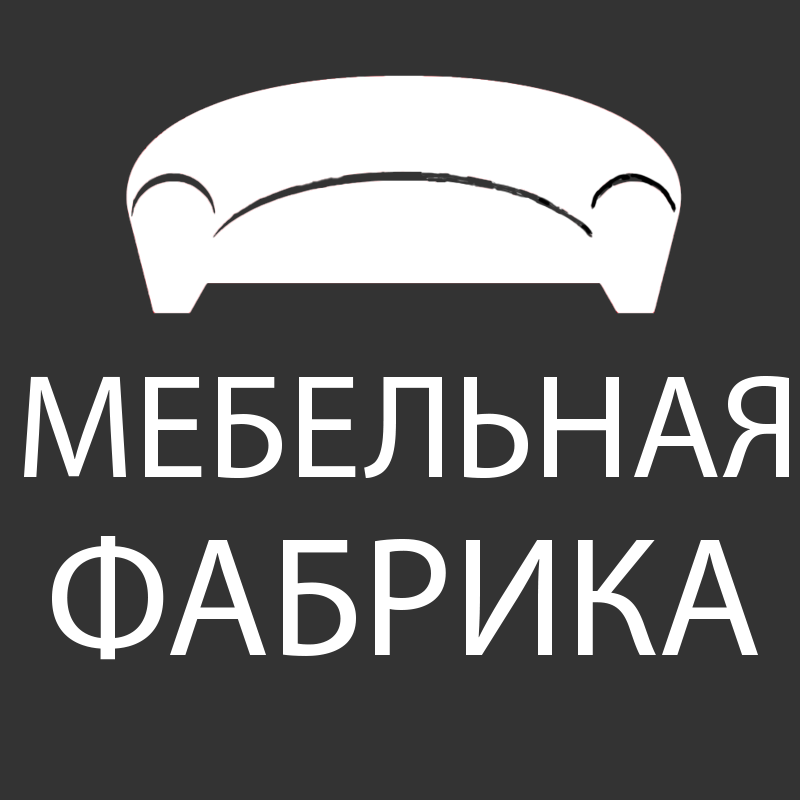
<style>
.page{position:relative;width:800px;height:800px;background:#333333}
.page>*{position:absolute;margin:0}
.t1{font:148.3px "MyriadPro-Regular";color:#ffffff}
.t2{font:170.2px "MyriadPro-Regular";color:#ffffff}
</style>
<div class="page">
<p class="t1" style="left:24px;top:375px;width:765px;height:103px">МЕБЕЛЬНАЯ</p>
<p class="t2" style="left:52px;top:536px;width:706px;height:124px">ФАБРИКА</p>
</div>
